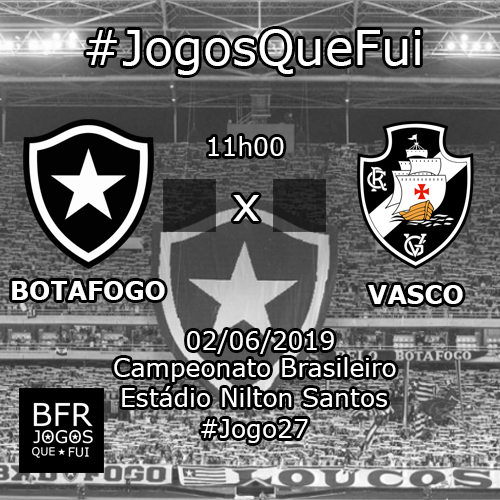
<style>
.page{position:relative;width:500px;height:500px}
.page>*{position:absolute;margin:0}
.t1{font:48px "Verdana";color:#ffffff}
.t2{font:25px "Verdana";color:#ffffff}
.t3{font:25px "Verdana-Bold";color:#ffffff}
</style>
<div class="page">
<p class="t1" style="left:86px;top:29px;width:335px;height:46px">#JogosQueFui</p>
<p class="t2" style="left:208px;top:136px;width:76px;height:20px">11h00</p>
<p class="t1" style="left:233px;top:195px;width:26px;height:26px">x</p>
<p class="t3" style="left:12px;top:281px;width:153px;height:19px">BOTAFOGO</p>
<p class="t3" style="left:368px;top:285px;width:95px;height:19px">VASCO</p>
<p class="t2" style="left:187px;top:330px;width:147px;height:24px">02/06/2019</p>
<p class="t2" style="left:114px;top:357px;width:282px;height:25px">Campeonato Brasileiro</p>
<p class="t2" style="left:122px;top:386px;width:265px;height:21px">Estádio Nilton Santos</p>
<p class="t2" style="left:201px;top:419px;width:107px;height:24px">#Jogo27</p>
</div>
